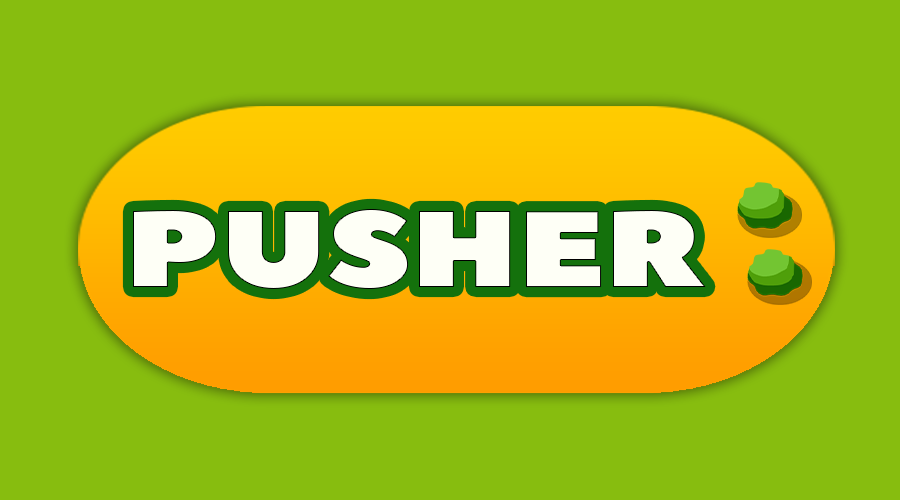
<style>
.page{position:relative;width:900px;height:500px;background:#87bd0f}
.page>*{position:absolute;margin:0}
.t1{font:108.2px "PeaceSans";color:#fefff6;scale:1.24 1}
</style>
<div class="page">
<p class="t1" style="left:133px;top:208px;width:573px;height:81px">PUSHER</p>
</div>
